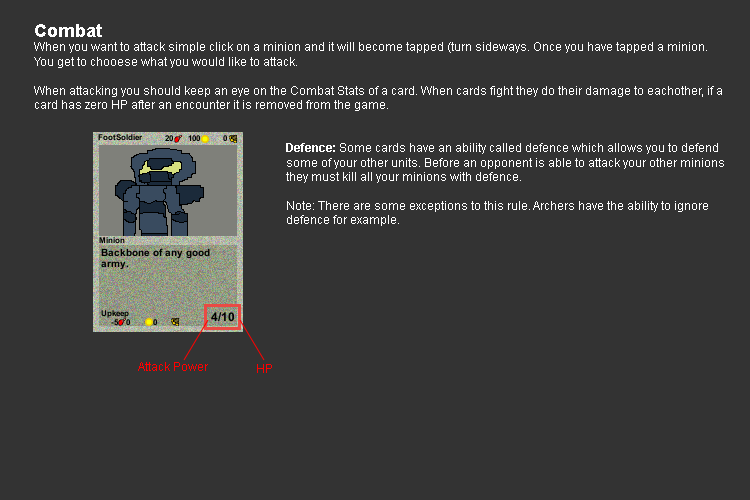
<style>
.page{position:relative;width:750px;height:500px;background:#333333}
.page>*{position:absolute;margin:0}
.t1{font:12px "ArialMT";color:#ffffff}
.t2{font:18px "Arial-BoldMT";color:#ffffff}
.t3{font:12px "Arial-BoldMT";color:#ffffff}
.t4{font:12px "ArialMT";color:#ff0000}
</style>
<div class="page">
<p class="t1" style="left:34px;top:24px;width:690px;height:202px"><span class="t2">Combat<br></span>When you want to attack simple click on a minion and it will become tapped (turn sideways. Once you have tapped a minion.<br>You get to chooese what you would like to attack.<br><br>When attacking you should keep an eye on the Combat Stats of a card. When cards fight they do their damage to eachother, if a<br>card has zero HP after an encounter it is removed from the game.<br><br><br><span class="t3">       Defence: </span>Some cards have an ability called defence which allows you to defend<br>       some of your other units. Before an opponent is able to attack your other minions<br>       they must kill all your minions with defence.<br><br>       Note: There are some exceptions to this rule. Archers have the ability to ignore<br>       defence for example.</p>
<p class="t4" style="left:138px;top:362px;width:70px;height:9px">Attack Power</p>
<p class="t4" style="left:257px;top:364px;width:15px;height:9px">HP</p>
</div>
